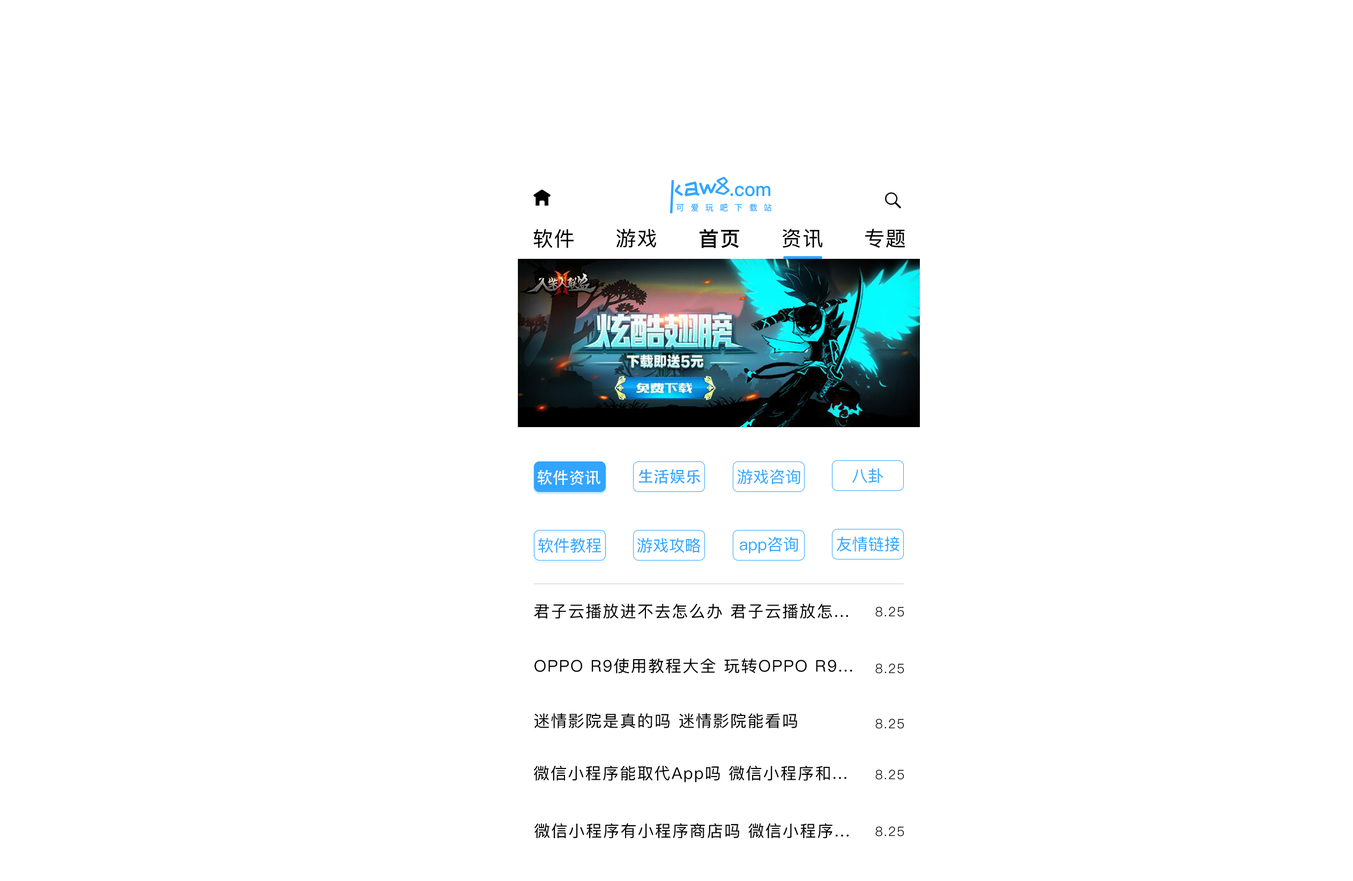
<style>
.page{position:relative;width:1353px;height:881px;background:#ffffff}
.page>*{position:absolute;margin:0}
.t1{font:20.4px "PingFang-SC-Medium";letter-spacing:0.05em;color:#000000}
.t2{font:20.4px "PingFang-SC-Bold";letter-spacing:0.05em;color:#000000}
.t3{font:16.1px "AdobeHeitiStd-Regular";color:#ffffff}
.t4{font:16.1px "AdobeHeitiStd-Regular";color:#31a5ff}
.t5{font:16.1px "PingFang-SC-Medium";color:#31a5ff}
.t6{font:16.1px "PingFang-SC-Medium";letter-spacing:0.075em;color:#000000}
.t7{font:12.9px "PingFang-SC-Regular";letter-spacing:0.075em;color:#000000}
</style>
<div class="page">
<p class="t1" style="left:533px;top:229px;width:41px;height:19px">软件</p>
<p class="t1" style="left:616px;top:229px;width:40px;height:19px">游戏</p>
<p class="t2" style="left:700px;top:229px;width:39px;height:19px">首页</p>
<p class="t1" style="left:782px;top:229px;width:41px;height:19px">资讯</p>
<p class="t1" style="left:865px;top:229px;width:40px;height:19px">专题</p>
<p class="t3" style="left:537px;top:470px;width:63px;height:15px">软件资讯</p>
<p class="t4" style="left:638px;top:469px;width:63px;height:15px">生活娱乐</p>
<p class="t5" style="left:738px;top:469px;width:62px;height:16px">游戏咨询</p>
<p class="t5" style="left:852px;top:469px;width:31px;height:15px">八卦</p>
<p class="t5" style="left:538px;top:538px;width:63px;height:15px">软件教程</p>
<p class="t5" style="left:637px;top:538px;width:64px;height:15px">游戏攻略</p>
<p class="t5" style="left:740px;top:537px;width:58px;height:17px">app咨询</p>
<p class="t5" style="left:836px;top:537px;width:64px;height:15px">友情链接</p>
<p class="t6" style="left:534px;top:604px;width:314px;height:15px">君子云播放进不去怎么办 君子云播放怎...</p>
<p class="t7" style="left:875px;top:607px;width:29px;height:10px">8.25</p>
<p class="t6" style="left:534px;top:658px;width:318px;height:16px">OPPO R9使用教程大全 玩转OPPO R9...</p>
<p class="t7" style="left:875px;top:664px;width:29px;height:10px">8.25</p>
<p class="t6" style="left:534px;top:714px;width:263px;height:15px">迷情影院是真的吗 迷情影院能看吗</p>
<p class="t7" style="left:875px;top:719px;width:29px;height:10px">8.25</p>
<p class="t6" style="left:534px;top:766px;width:312px;height:17px">微信小程序能取代App吗 微信小程序和...</p>
<p class="t7" style="left:875px;top:770px;width:29px;height:10px">8.25</p>
<p class="t6" style="left:534px;top:823px;width:315px;height:15px">微信小程序有小程序商店吗 微信小程序...</p>
<p class="t7" style="left:875px;top:827px;width:29px;height:10px">8.25</p>
</div>
